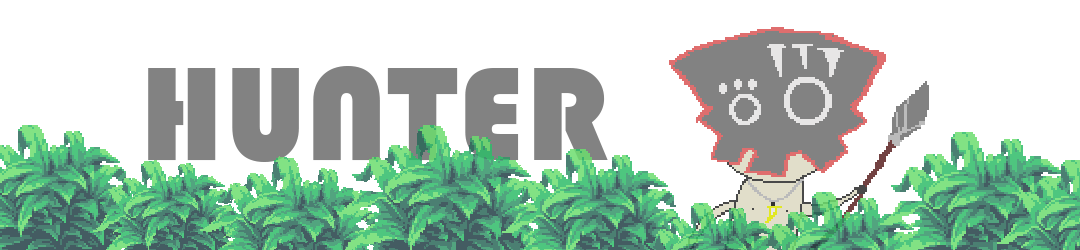
<style>
.page{position:relative;width:1080px;height:250px;background:#ffffff}
.page>*{position:absolute;margin:0}
.t1{font:138px "Bauhaus93";color:#828282}
</style>
<div class="page">
<p class="t1" style="left:148px;top:66px;width:460px;height:96px">HUNTER</p>
</div>
